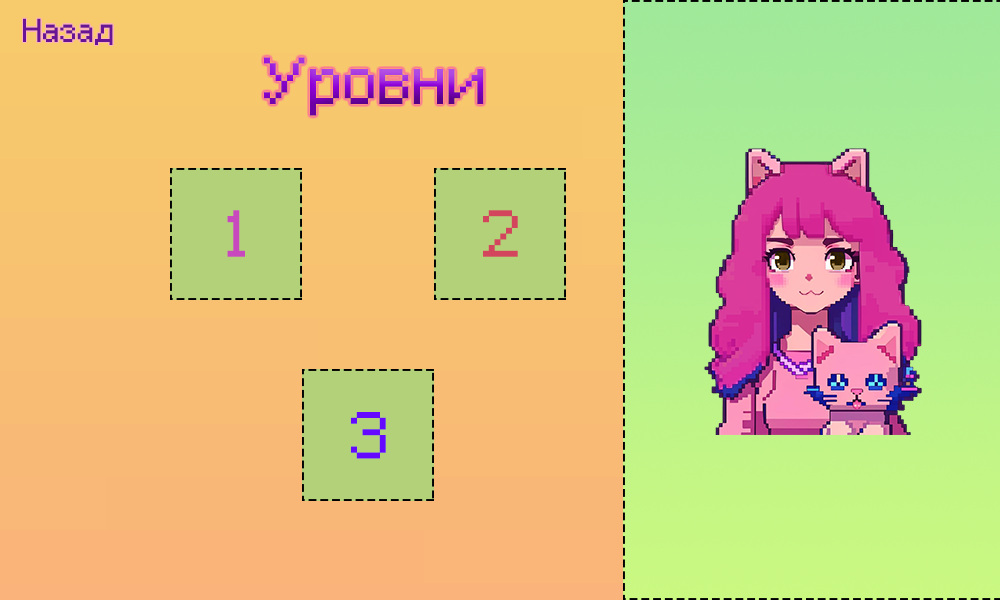
<style>
.page{position:relative;width:1000px;height:600px}
.page>*{position:absolute;margin:0}
.t1{font:37.5px "EpilepsySans";color:#681494}
.t2{font:75px "EpilepsySans"}
.t3{font:75px "EpilepsySans";color:#c848bd}
.t4{font:75px "EpilepsySans";color:#d3455c}
.t5{font:75px "EpilepsySans";color:#6508ff}
</style>
<div class="page">
<p class="t1" style="left:23px;top:18px;width:90px;height:27px">Назад</p>
<p class="t2" style="left:264px;top:57px;width:220px;height:59px">Уровни</p>
<p class="t3" style="left:227px;top:210px;width:18px;height:47px">1</p>
<p class="t4" style="left:483px;top:210px;width:35px;height:47px">2</p>
<p class="t5" style="left:351px;top:412px;width:35px;height:47px">3</p>
</div>
